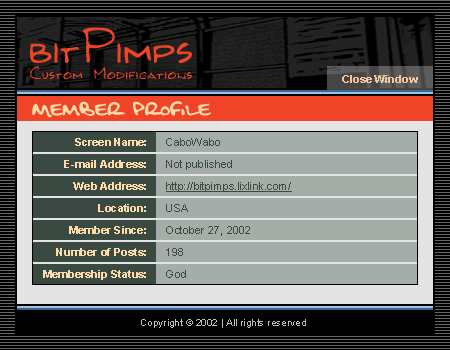
<style>
.page{position:relative;width:450px;height:350px;background:#a4ada8}
.page>*{position:absolute;margin:0}
.t1{font:11px "Arial-BoldMT";color:#f8c599}
.t2{font:20px "FatboySlimBLTC(BRK)";color:#ffddab}
.t3{font:11px "Arial-BoldMT";color:#ffddab}
.t4{font:11px "ArialMT";color:#3a4942}
.t5{font:11px "ArialMT";color:#3a4942;text-decoration:underline}
.t6{font:10px "ArialMT";color:#b6c4bd}
</style>
<div class="page">
<p class="t1" style="left:342px;top:75px;width:76px;height:8px">Close Window</p>
<p class="t2" style="left:32px;top:101px;width:180px;height:17px">Member Profile</p>
<p class="t3" style="left:75px;top:138px;width:71px;height:8px">Screen Name:</p>
<p class="t4" style="left:166px;top:138px;width:54px;height:8px">CaboWabo</p>
<p class="t3" style="left:64px;top:160px;width:82px;height:8px">E-mail Address:</p>
<p class="t4" style="left:166px;top:160px;width:66px;height:10px">Not published</p>
<p class="t3" style="left:73px;top:182px;width:73px;height:8px">Web Address:</p>
<p class="t5" style="left:166px;top:182px;width:126px;height:10px">http://bitpimps.lixlink.com/</p>
<p class="t3" style="left:98px;top:204px;width:48px;height:8px">Location:</p>
<p class="t4" style="left:166px;top:204px;width:22px;height:8px">USA</p>
<p class="t3" style="left:69px;top:226px;width:77px;height:8px">Member Since:</p>
<p class="t4" style="left:166px;top:226px;width:84px;height:10px">October 27, 2002</p>
<p class="t3" style="left:56px;top:248px;width:90px;height:8px">Number of Posts:</p>
<p class="t4" style="left:166px;top:248px;width:17px;height:8px">198</p>
<p class="t3" style="left:43px;top:270px;width:103px;height:10px">Membership Status:</p>
<p class="t4" style="left:166px;top:270px;width:20px;height:8px">God</p>
<p class="t6" style="left:141px;top:319px;width:165px;height:9px">Copyright © 2002 | All rights reserved</p>
</div>
